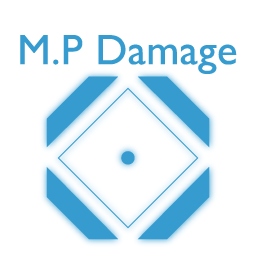
<style>
.page{position:relative;width:256px;height:256px;background:#ffffff}
.page>*{position:absolute;margin:0}
.t1{font:42.7px "GillSansMT";letter-spacing:0.01em;color:#369ccf}
</style>
<div class="page">
<p class="t1" style="left:20px;top:35px;width:217px;height:39px">M.P Damage</p>
</div>
